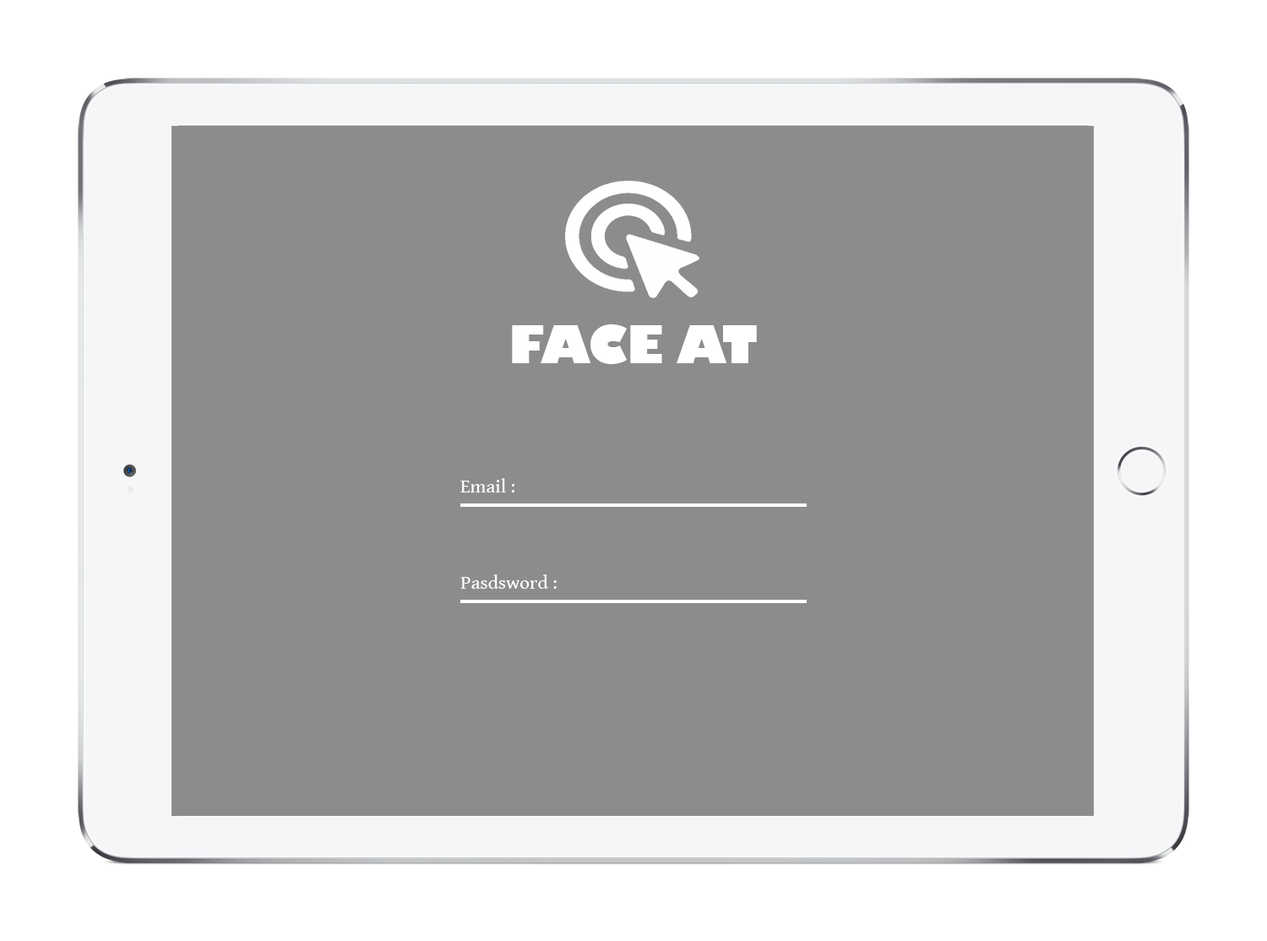
<style>
.page{position:relative;width:1267px;height:941px;background:#8c8c8c}
.page>*{position:absolute;margin:0}
.t1{font:50.7px "GillSans-UltraBold";color:#ffffff}
.t2{font:19.4px "GentiumBookBasic";color:#ffffff}
</style>
<div class="page">
<p class="t1" style="left:512px;top:324px;width:245px;height:40px">FACE AT</p>
<p class="t2" style="left:460px;top:478px;width:54px;height:14px">Email :</p>
<p class="t2" style="left:460px;top:574px;width:97px;height:15px">Pasdsword :</p>
</div>
